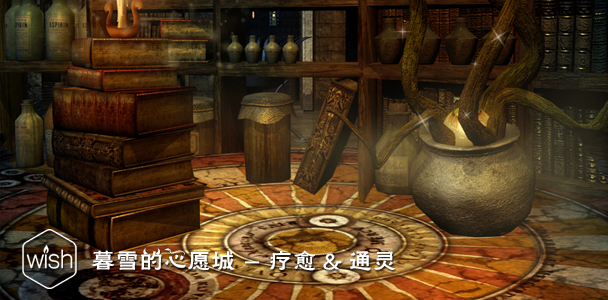
<style>
.page{position:relative;width:608px;height:300px}
.page>*{position:absolute;margin:0}
.t1{font:24px "FZHLJW--GB1-0";color:#ffffff}
</style>
<div class="page">
<p class="t1" style="left:92px;top:248px;width:303px;height:23px">暮雪的心愿城 - 疗愈 &amp; 通灵</p>
</div>
